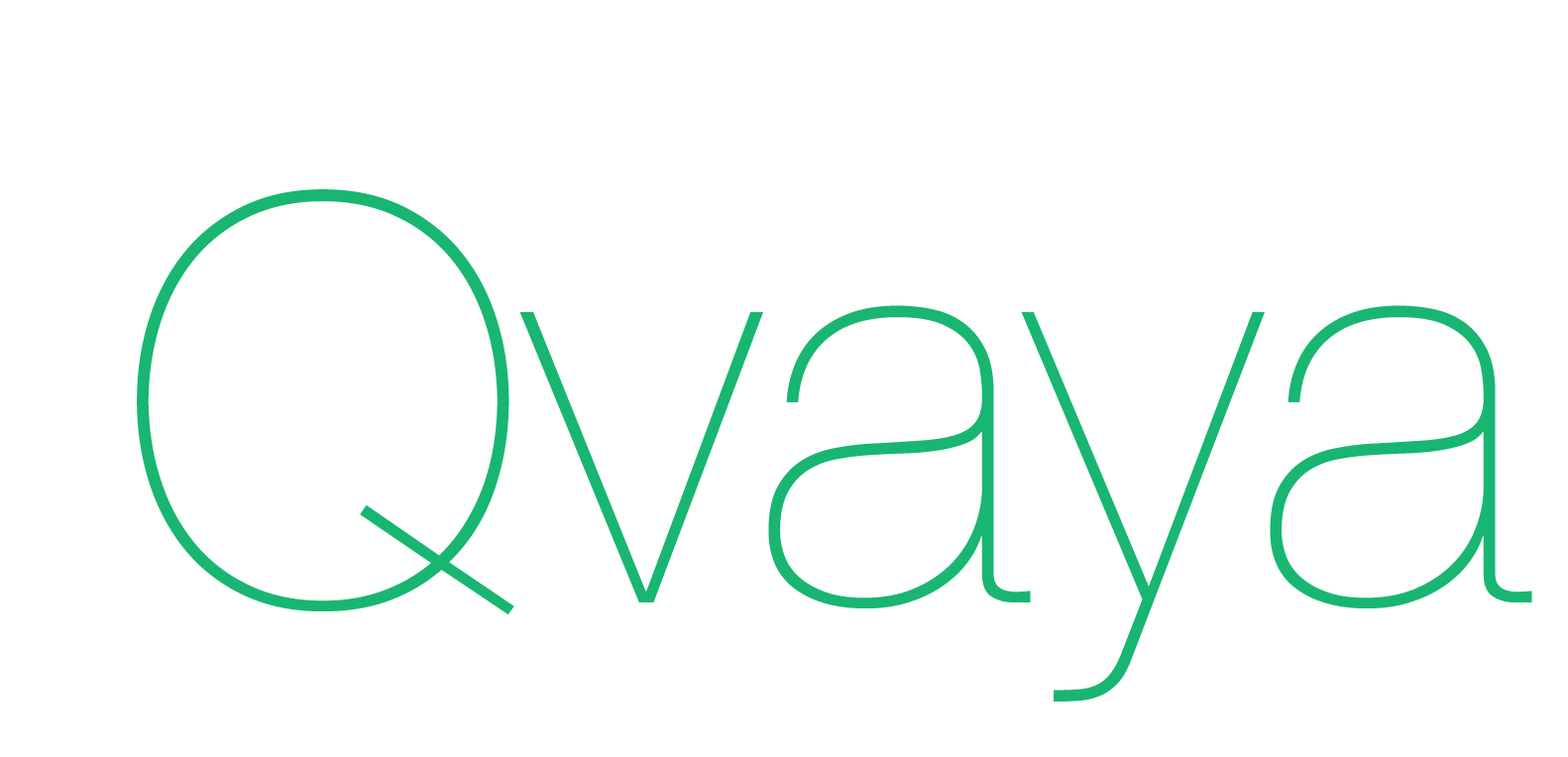
<style>
.page{position:relative;width:1568px;height:757px;background:#ffffff}
.page>*{position:absolute;margin:0}
.t1{font:565px "HelveticaNeue-UltraLight";color:#18b671}
</style>
<div class="page">
<p class="t1" style="left:137px;top:189px;width:1395px;height:513px">Qvaya</p>
</div>
